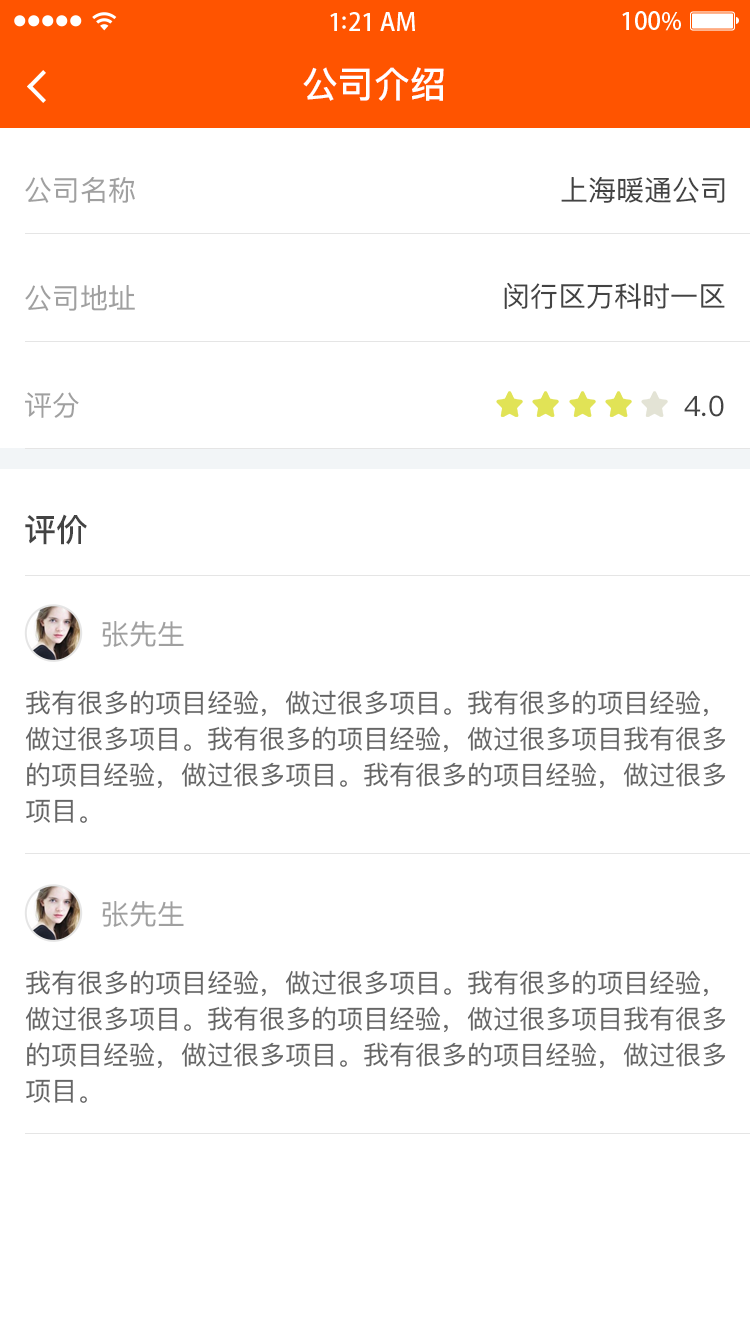
<style>
.page{position:relative;width:750px;height:1334px;background:#ffffff}
.page>*{position:absolute;margin:0}
.t1{font:36px "PingFangSC-Medium";color:#ffffff}
.t2{font:28px "PingFangSC-Regular";color:#a0a0a0}
.t3{font:28px "PingFangSC-Regular";color:#434343}
.t4{font:32px "PingFangSC-Medium";color:#434343}
.t5{font:26px/40px "PingFangSC-Regular";color:#666666}
</style>
<div class="page">
<p class="t1" style="left:303px;top:67px;width:141px;height:34px">公司介绍</p>
<p class="t2" style="left:25px;top:177px;width:110px;height:26px">公司名称</p>
<p class="t3" style="left:561px;top:176px;width:164px;height:27px">上海暖通公司</p>
<p class="t2" style="left:25px;top:285px;width:110px;height:26px">公司地址</p>
<p class="t3" style="left:504px;top:282px;width:221px;height:27px">闵行区万科时一区</p>
<p class="t2" style="left:25px;top:392px;width:54px;height:26px">评分</p>
<p class="t3" style="left:684px;top:395px;width:40px;height:22px">4.0</p>
<p class="t4" style="left:25px;top:514px;width:62px;height:31px">评价</p>
<p class="t2" style="left:102px;top:621px;width:82px;height:26px">张先生</p>
<p class="t5" style="left:25px;top:690px;width:700px;height:133px">我有很多的项目经验，做过很多项目。我有很多的项目经验，<br>做过很多项目。我有很多的项目经验，做过很多项目我有很多<br>的项目经验，做过很多项目。我有很多的项目经验，做过很多<br>项目。</p>
<p class="t2" style="left:102px;top:901px;width:82px;height:26px">张先生</p>
<p class="t5" style="left:25px;top:970px;width:700px;height:133px">我有很多的项目经验，做过很多项目。我有很多的项目经验，<br>做过很多项目。我有很多的项目经验，做过很多项目我有很多<br>的项目经验，做过很多项目。我有很多的项目经验，做过很多<br>项目。</p>
</div>
